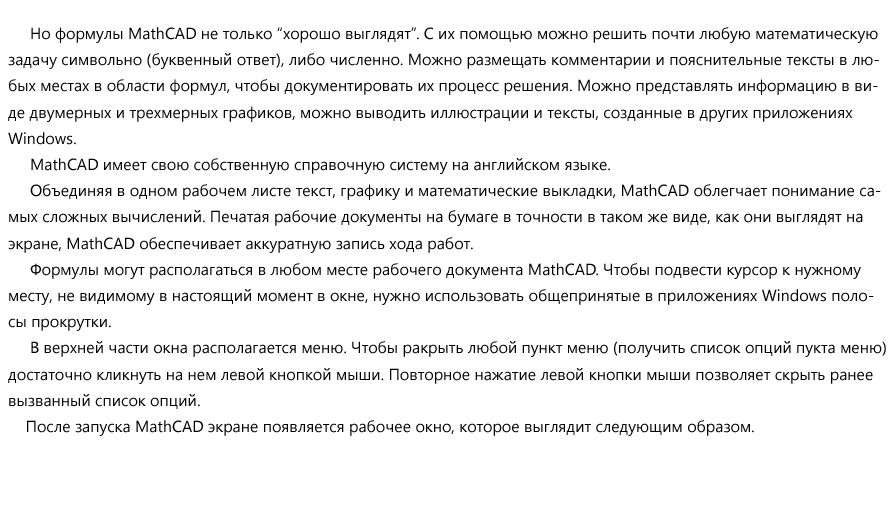
<style>
.page{position:relative;width:890px;height:520px;background:#ffffff}
.page>*{position:absolute;margin:0}
.t1{font:16px "SegoeUI";color:#000000}
</style>
<div class="page">
<p class="t1" style="left:8px;top:27px;width:878px;height:409px">Но формулы MathCAD не только “хорошо выглядят”. С их помощью можно решить почти любую математическую<br>задачу символьно (буквенный ответ), либо численно. Можно размещать комментарии и пояснительные тексты в лю-<br>бых местах в области формул, чтобы документировать их процесс решения. Можно представлять информацию в ви-<br>де двумерных и трехмерных графиков, можно выводить иллюстрации и тексты, созданные в других приложениях <br>Windows.<br>     MathCAD имеет свою собственную справочную систему на английском языке. <br>     Объединяя в одном рабочем листе текст, графику и математические выкладки, MathCAD облегчает понимание са-<br>мых сложных вычислений. Печатая рабочие документы на бумаге в точности в таком же виде, как они выглядят на<br>экране, MathCAD обеспечивает аккуратную запись хода работ.<br>     Формулы могут располагаться в любом месте рабочего документа MathCAD. Чтобы подвести курсор к нужному <br>месту, не видимому в настоящий момент в окне, нужно использовать общепринятые в приложениях Windows поло-<br>сы прокрутки.<br>     В верхней части окна располагается меню. Чтобы ракрыть любой пункт меню (получить список опций пукта меню)<br>достаточно кликнуть на нем левой кнопкой мыши. Повторное нажатие левой кнопки мыши позволяет скрыть ранее<br>вызванный список опций.<br>    После запуска MathCAD экране появляется рабочее окно, которое выглядит следующим образом.</p>
</div>
